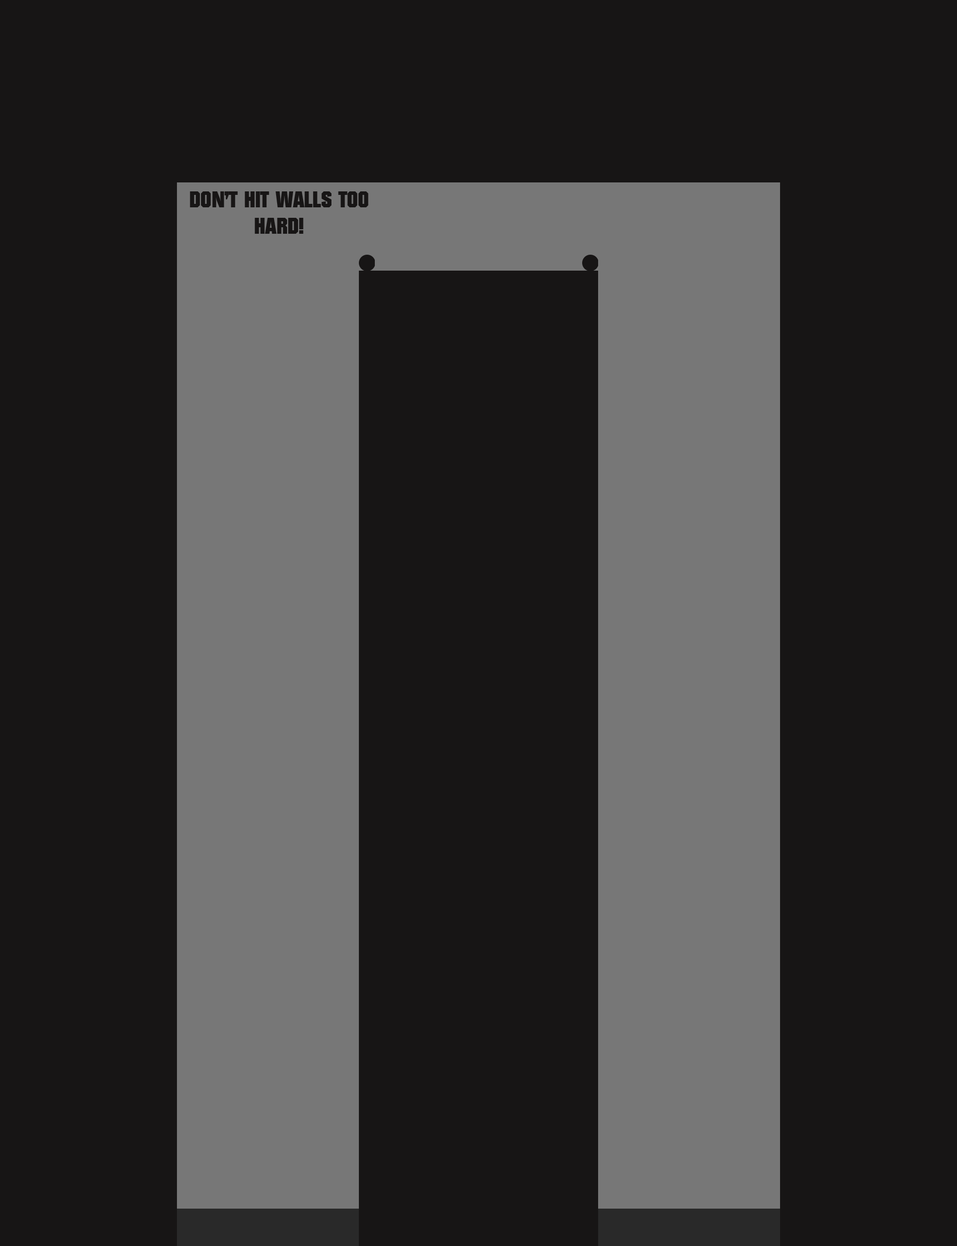
<style>
.page{position:relative;width:957px;height:1246px;background:#171515}
.page>*{position:absolute;margin:0}
.t1{font:21.9px "Autumn";color:#2c2b2c}
</style>
<div class="page">
<p class="t1" style="left:190px;top:191px;width:178px;height:43px;text-align:center">DON’T HIT WALLS TOO<br>HARD!</p>
</div>
